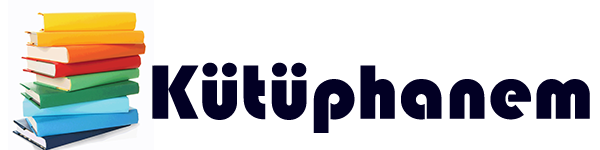
<style>
.page{position:relative;width:600px;height:150px;background:#ffffff}
.page>*{position:absolute;margin:0}
.t1{font:79.2px "Bauhaus93";color:#020024}
</style>
<div class="page">
<p class="t1" style="left:152px;top:62px;width:438px;height:71px">Kütüphanem</p>
</div>
